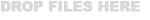
<style>
.page{position:relative;width:150px;height:20px;background:#ffffff}
.page>*{position:absolute;margin:0}
.t1{font:13.5px "Arial-Black";color:#d8d8d9;font-weight:bold}
</style>
<div class="page">
<p class="t1" style="left:1px;top:1px;width:139px;height:11px">DROP FILES HERE</p>
</div>
